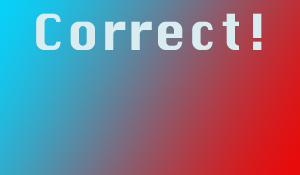
<style>
.page{position:relative;width:300px;height:175px}
.page>*{position:absolute;margin:0}
.t1{font:48px "Krungthep";letter-spacing:0.05em;color:#d9edf1}
</style>
<div class="page">
<p class="t1" style="left:36px;top:13px;width:226px;height:37px">Correct!</p>
</div>
